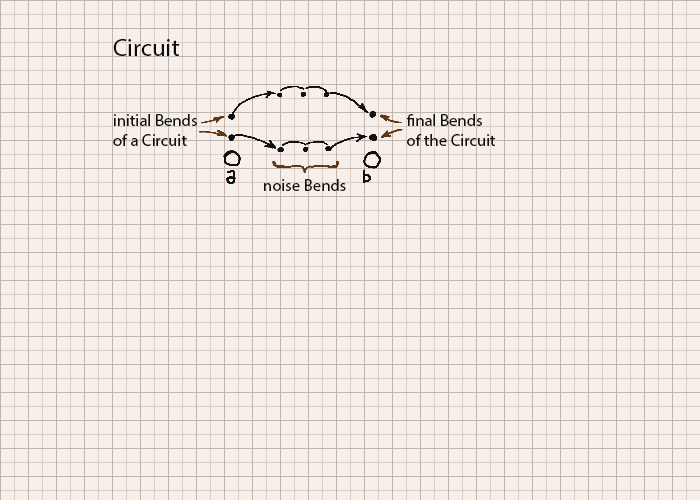
<style>
.page{position:relative;width:700px;height:500px;background:#f7f0ea}
.page>*{position:absolute;margin:0}
.t1{font:25px "MyriadPro-Regular";color:#0d0d0d}
.t2{font:16.7px "MyriadPro-Regular";color:#0d0d0d}
</style>
<div class="page">
<p class="t1" style="left:113px;top:39px;width:67px;height:17px">Circuit</p>
<p class="t2" style="left:113px;top:114px;width:84px;height:32px">initial Bends<br>of a Circuit</p>
<p class="t2" style="left:406px;top:114px;width:90px;height:32px">final Bends<br>of the Circuit</p>
<p class="t2" style="left:264px;top:179px;width:82px;height:12px">noise Bends</p>
</div>
